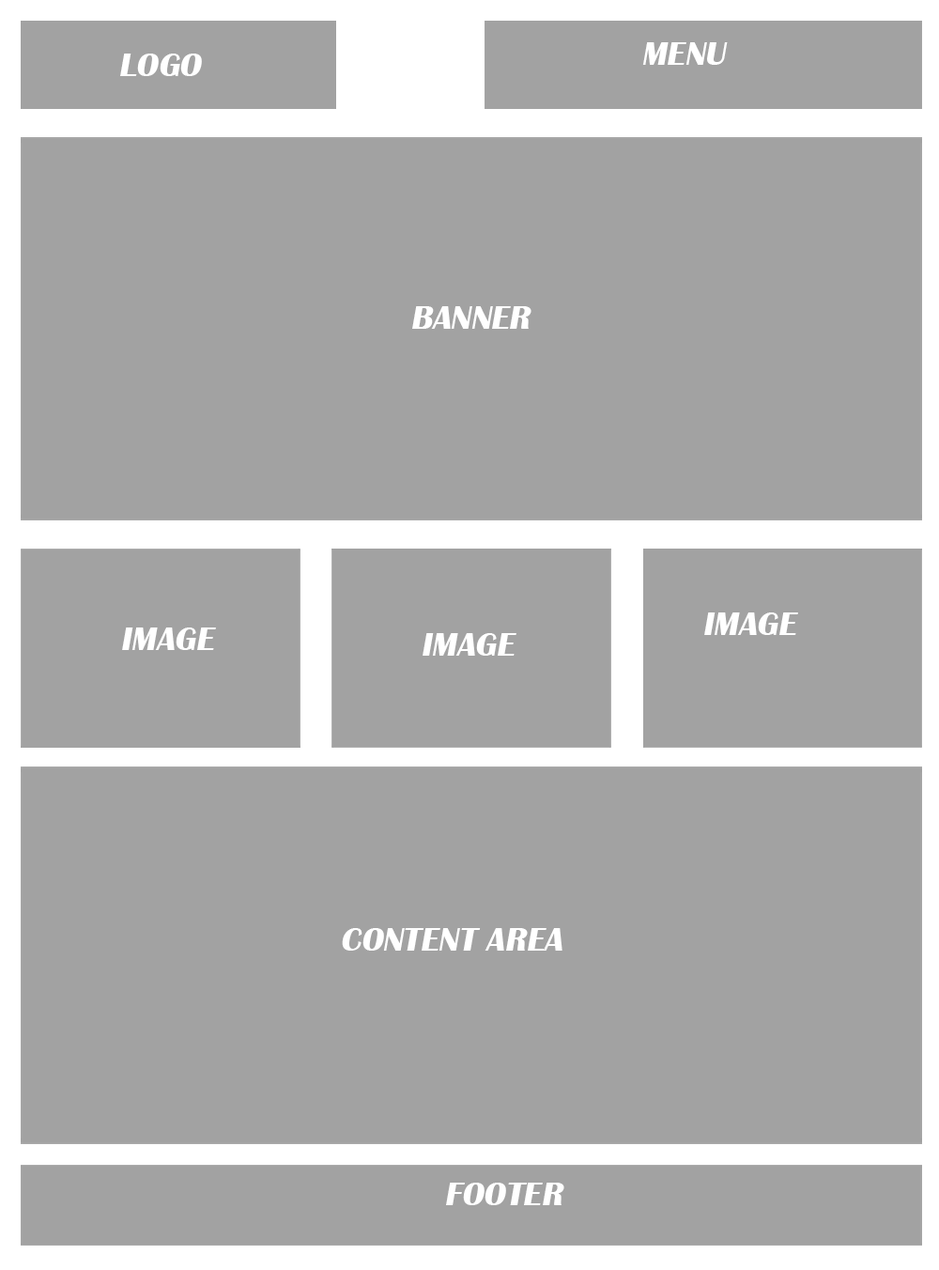
<style>
.page{position:relative;width:939px;height:1270px;background:#a2a2a2}
.page>*{position:absolute;margin:0}
.t1{font:33.8px "BritannicBold";color:#ffffff;font-style:italic}
</style>
<div class="page">
<p class="t1" style="left:120px;top:54px;width:82px;height:22px">LOGO</p>
<p class="t1" style="left:642px;top:42px;width:86px;height:23px">MENU</p>
<p class="t1" style="left:412px;top:306px;width:120px;height:23px">BANNER</p>
<p class="t1" style="left:704px;top:612px;width:94px;height:23px">IMAGE</p>
<p class="t1" style="left:122px;top:627px;width:94px;height:23px">IMAGE</p>
<p class="t1" style="left:423px;top:633px;width:94px;height:23px">IMAGE</p>
<p class="t1" style="left:342px;top:928px;width:221px;height:22px">CONTENT AREA</p>
<p class="t1" style="left:446px;top:1182px;width:118px;height:23px">FOOTER</p>
</div>
